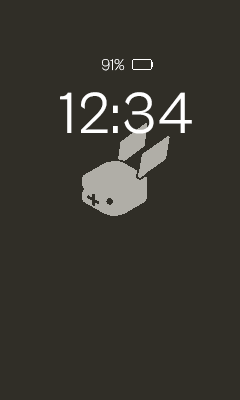
<style>
.page{position:relative;width:240px;height:400px;background:#302e27}
.page>*{position:absolute;margin:0}
.t1{font:16px "CabinetGrotesk-Thin";color:#ffffff}
.t2{font:60px "CabinetGrotesk-Regular";color:#ffffff}
</style>
<div class="page">
<p class="t1" style="left:102px;top:59px;width:23px;height:12px">91%</p>
<p class="t2" style="left:60px;top:92px;width:132px;height:42px">12:34</p>
</div>
